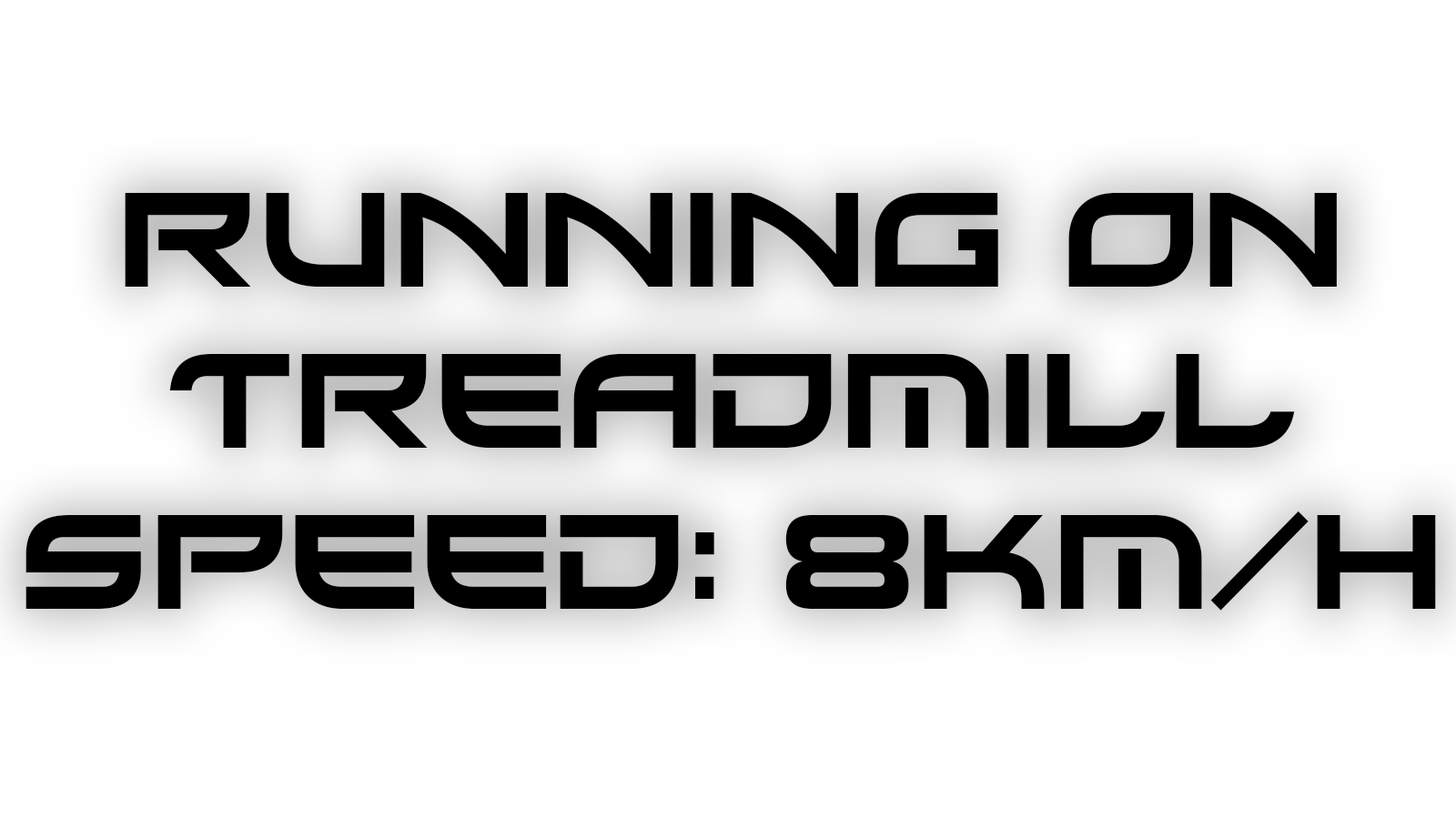
<style>
.page{position:relative;width:1456px;height:819px;background:#ffffff}
.page>*{position:absolute;margin:0}
.t1{font:134px "Xirod-Regular";color:#000000}
</style>
<div class="page">
<p class="t1" style="left:25px;top:193px;width:1411px;height:418px;text-align:center">Running on<br>Treadmill<br>speed: 8km/h</p>
</div>
